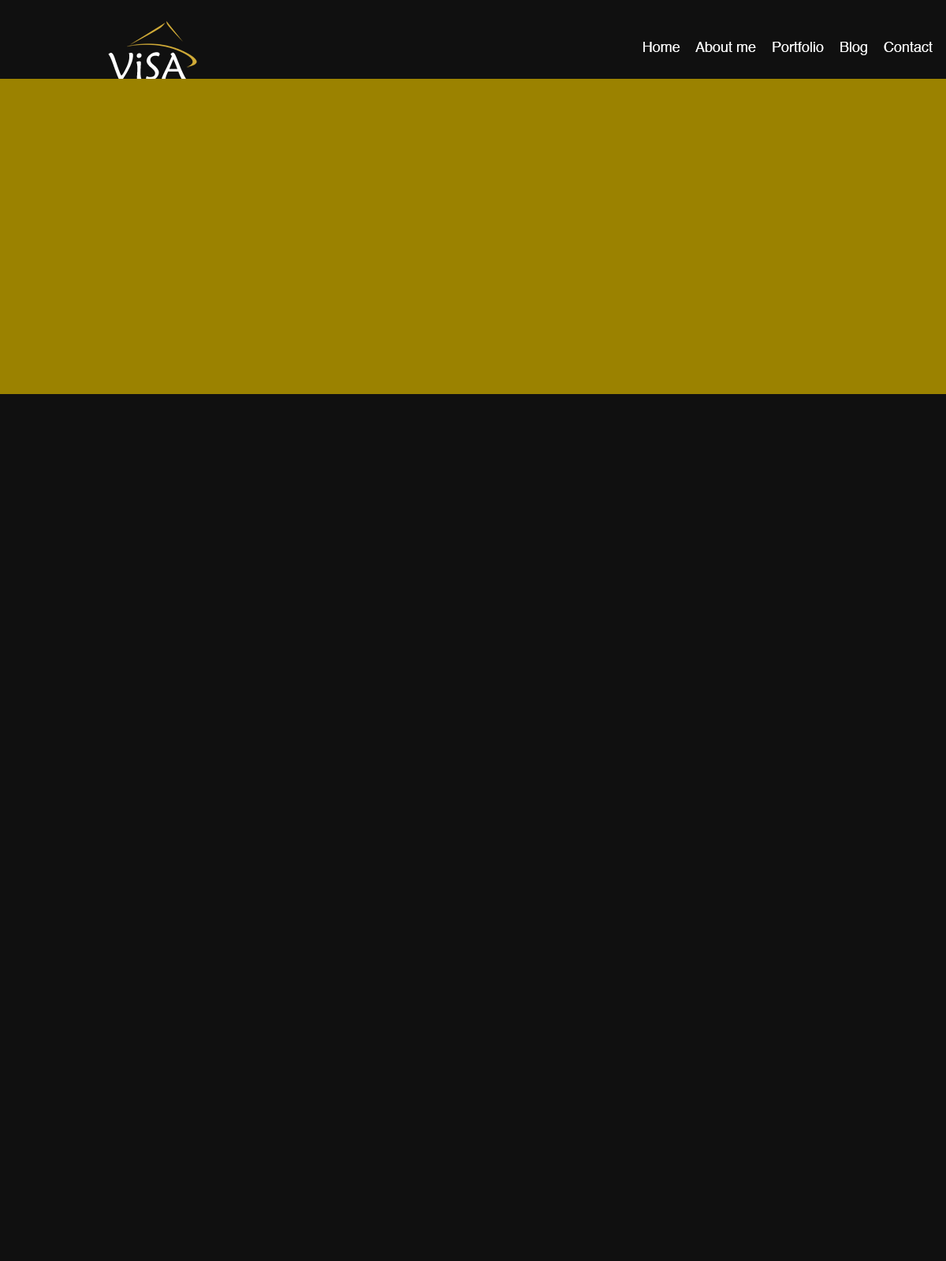
<style>
.page{position:relative;width:946px;height:1261px;background:#101010}
.page>*{position:absolute;margin:0}
.t1{font:14.2px "Helvetica";color:#ffffff}
</style>
<div class="page">
<p class="t1" style="left:643px;top:42px;width:289px;height:13px">Home    About me    Portfolio    Blog    Contact</p>
</div>
